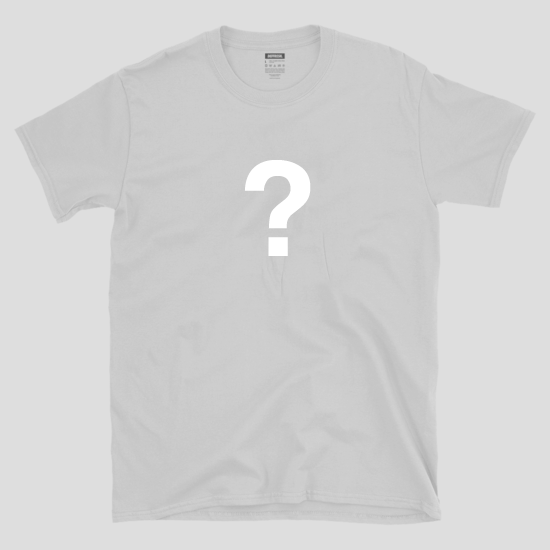
<style>
.page{position:relative;width:550px;height:550px;background:#dedede}
.page>*{position:absolute;margin:0}
.t1{font:132px "Helvetica-Bold";letter-spacing:-0.02em;color:#ffffff;text-transform:uppercase}
</style>
<div class="page">
<p class="t1" style="left:244px;top:160px;width:67px;height:96px">?</p>
</div>
